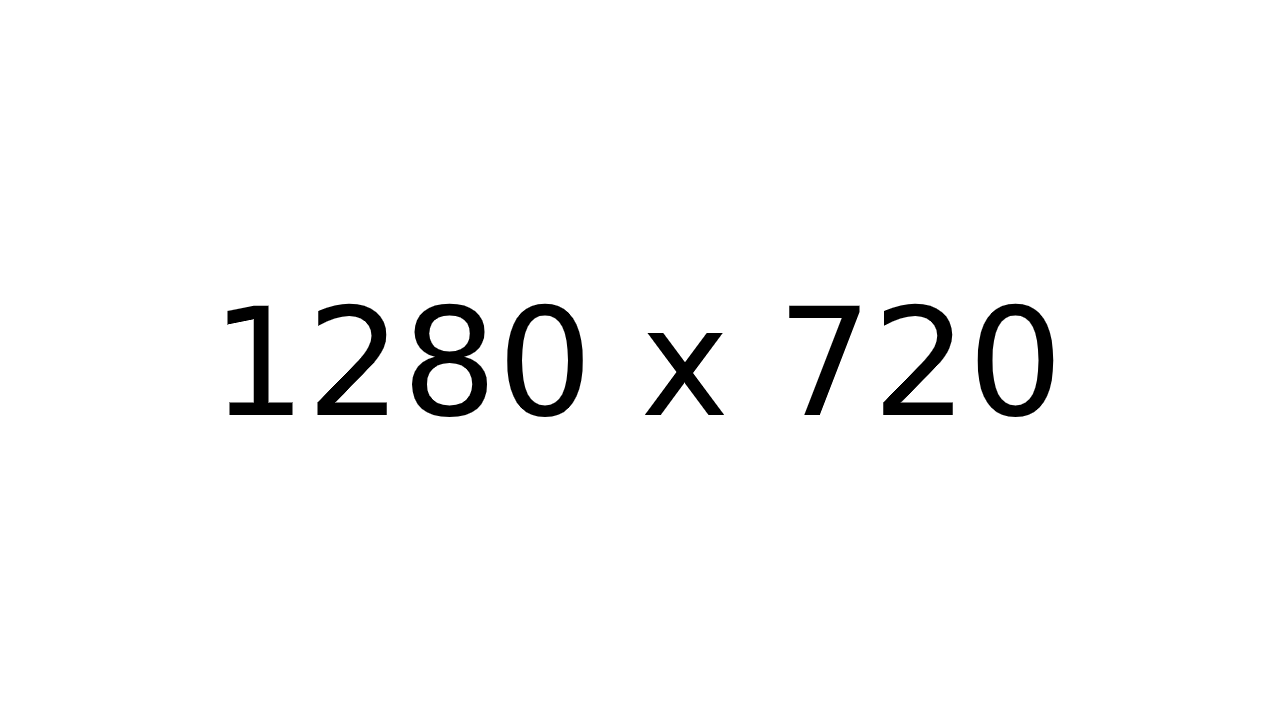
<style>
.page{position:relative;width:1280px;height:720px;background:#ffffff}
.page>*{position:absolute;margin:0}
.t1{font:150px "DejaVuSans";color:#000000}
</style>
<div class="page">
<p class="t1" style="left:227px;top:303px;width:827px;height:115px">1280 x 720</p>
</div>
